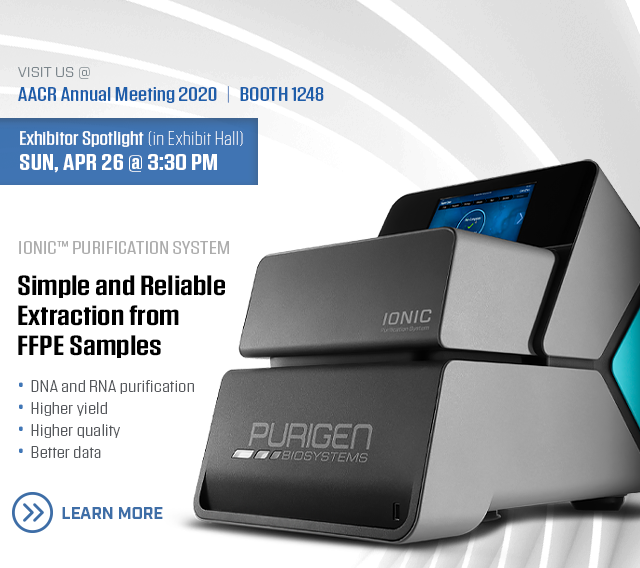
<style>
.page{position:relative;width:640px;height:568px;background:#ffffff}
.page>*{position:absolute;margin:0}
.t1{font:20px/24px "Tungsten-Medium";color:#1e5eaa;scale:1.4 1}
.t2{font:14px/24px "Forza-Light";color:#7c868c;text-transform:uppercase}
.t3{font:20px/24px "Tungsten-Thin";color:#1e5eaa;text-transform:uppercase;scale:1.4 1}
.t4{font:20px/24px "Tungsten-Medium";color:#1e5eaa;text-transform:uppercase;scale:1.4 1}
.t5{font:19px "Tungsten-Medium";letter-spacing:0.005em;color:#ffffff;scale:1.35 1}
.t6{font:19px "Tungsten-Thin";letter-spacing:0.005em;color:#ffffff;scale:1.35 1}
.t7{font:23px "Tungsten-Semibold";letter-spacing:0.005em;color:#ffffff;scale:1.35 1}
.t8{font:18px "Tungsten-Book";color:#adadad;text-transform:uppercase;scale:1.55 1}
.t9{font:28px/30px "Tungsten-Semibold";color:#000000;scale:1.38 1}
.t10{font:16.5px/22px "Tungsten-Light";color:#56595d;scale:1.55 1}
.t11{font:20px/22px "Tungsten-Bold";color:#3f77b7}
.t12{font:16.7px "Industry-Bold";letter-spacing:-0.01em;color:#3e6ea7;text-transform:uppercase}
</style>
<div class="page">
<p class="t1" style="left:18px;top:67px;width:306px;height:36px"><span class="t2">Visit us @<br></span>AACR Annual Meeting 2020  <span class="t3">|  </span><span class="t4">BOOTH 1248</span></p>
<p class="t5" style="left:20px;top:131px;width:223px;height:16px">Exhibitor Spotlight <span class="t6">(in Exhibit Hall)</span></p>
<p class="t7" style="left:20px;top:154px;width:197px;height:19px">SUN, APR 26 @ 3:30 PM</p>
<p class="t8" style="left:19px;top:241px;width:210px;height:13px">Ionic™ Purification System</p>
<p class="t9" style="left:18px;top:275px;width:207px;height:83px">Simple and Reliable <br>Extraction from<br>FFPE Samples</p>
<p class="t10" style="left:19px;top:380px;width:175px;height:78px"><span class="t11">•   </span>DNA and RNA purification<br><span class="t11">•   </span>Higher yield <br><span class="t11">•   </span>Higher quality<br><span class="t11">•   </span>Better data</p>
<p class="t12" style="left:62px;top:507px;width:101px;height:12px">Learn More</p>
</div>
